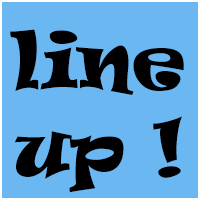
<style>
.page{position:relative;width:200px;height:200px;background:#6bb7f2}
.page>*{position:absolute;margin:0}
.t1{font:72px "Ravie";color:#000000}
</style>
<div class="page">
<p class="t1" style="left:10px;top:29px;width:174px;height:164px;text-align:center">line <br>up !</p>
</div>
